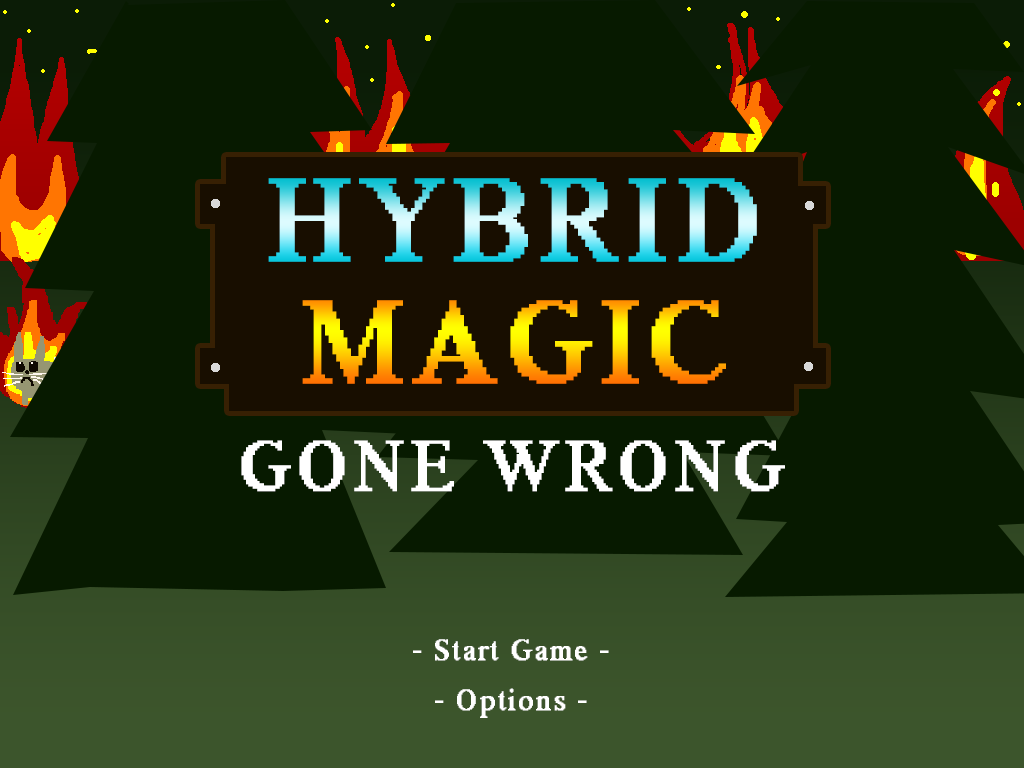
<style>
.page{position:relative;width:1024px;height:768px;background:#071a00}
.page>*{position:absolute;margin:0}
.t1{font:118.9px/122px "MS Serif";letter-spacing:0.075em;font-weight:bold}
.t2{font:72px "MS Serif";letter-spacing:0.075em;color:#ffffff;font-weight:bold}
.t3{font:30px "MS Serif";letter-spacing:0.075em;color:#ffffff;font-weight:bold}
</style>
<div class="page">
<p class="t1" style="left:268px;top:178px;width:489px;height:206px;text-align:center">HYBRID<br>MAGIC</p>
<p class="t2" style="left:241px;top:440px;width:544px;height:52px">GONE WRONG</p>
<p class="t3" style="left:413px;top:639px;width:196px;height:22px">- Start Game -</p>
<p class="t3" style="left:435px;top:688px;width:152px;height:30px">- Options -</p>
</div>
